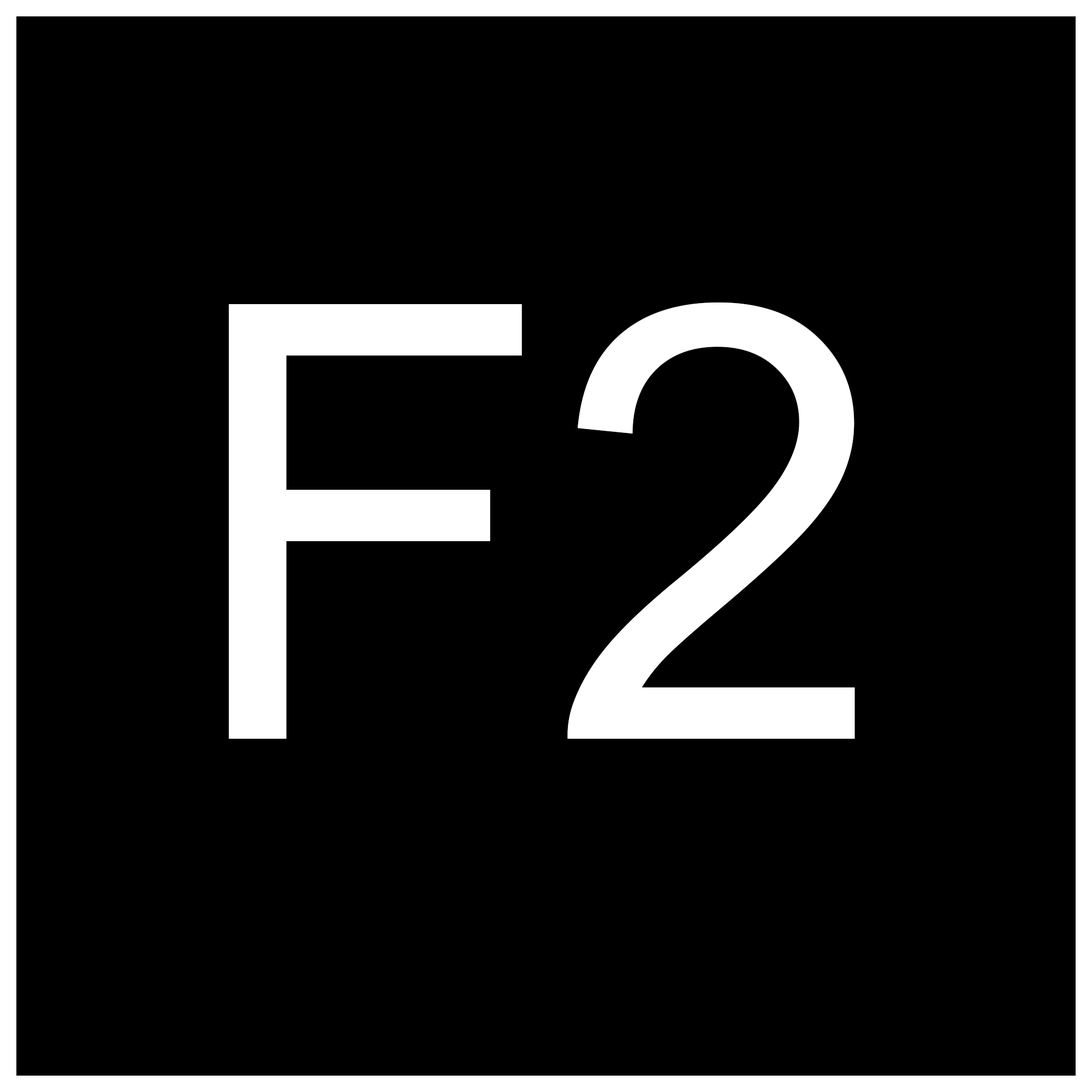
<style>
.page{position:relative;width:1092px;height:1092px;background:#000000}
.page>*{position:absolute;margin:0}
.t1{font:606.7px "ArialMT";color:#ffffff}
</style>
<div class="page">
<p class="t1" style="left:229px;top:302px;width:626px;height:437px">F2</p>
</div>
